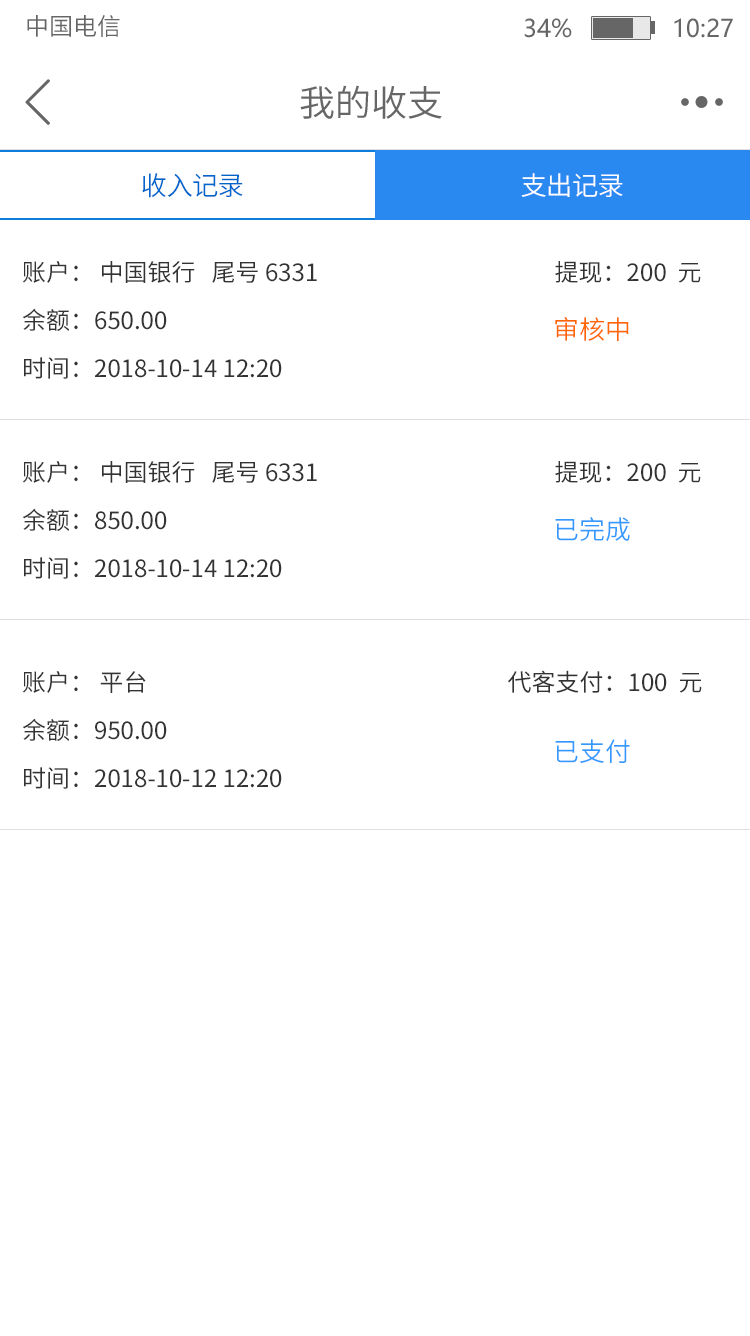
<style>
.page{position:relative;width:750px;height:1336px;background:#ffffff}
.page>*{position:absolute;margin:0}
.t1{font:24px "SourceHanSansCN-Normal";color:#666666}
.t2{font:24px "MicrosoftYaHei";color:#666666}
.t3{font:36px "SourceHanSansCN-Normal";color:#666666}
.t4{font:26.2px "SourceHanSansCN-Normal";letter-spacing:-0.025em;color:#0066cc}
.t5{font:26.2px "SourceHanSansCN-Normal";letter-spacing:-0.025em;color:#ffffff}
.t6{font:24px/48px "SourceHanSansCN-Regular";color:#333333}
.t7{font:26px "SourceHanSansCN-Normal";color:#ff6600}
.t8{font:26px "SourceHanSansCN-Normal";color:#3399ff}
</style>
<div class="page">
<p class="t1" style="left:27px;top:15px;width:93px;height:22px">中国电信</p>
<p class="t2" style="left:524px;top:18px;width:209px;height:20px">34%              10:27</p>
<p class="t3" style="left:300px;top:85px;width:142px;height:34px">我的收支</p>
<p class="t4" style="left:142px;top:173px;width:101px;height:25px">收入记录</p>
<p class="t5" style="left:521px;top:173px;width:102px;height:24px">支出记录</p>
<p class="t6" style="left:22px;top:261px;width:679px;height:118px">账户： 中国银行   尾号 6331                                            提现：200  元<br>余额：650.00                                   <br>时间：2018-10-14 12:20</p>
<p class="t7" style="left:555px;top:317px;width:74px;height:24px">审核中</p>
<p class="t6" style="left:22px;top:461px;width:679px;height:118px">账户： 中国银行   尾号 6331                                            提现：200  元<br>余额：850.00                                   <br>时间：2018-10-14 12:20</p>
<p class="t8" style="left:555px;top:517px;width:75px;height:24px">已完成</p>
<p class="t6" style="left:22px;top:670px;width:680px;height:119px">账户： 平台                                                                   代客支付：100  元<br>余额：950.00                                   <br>时间：2018-10-12 12:20</p>
<p class="t8" style="left:555px;top:739px;width:75px;height:24px">已支付</p>
</div>
